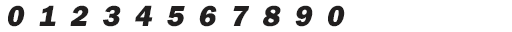
<style>
.page{position:relative;width:512px;height:32px;background:#ffffff}
.page>*{position:absolute;margin:0}
.t1{font:30px "FranklinGothic-Heavy";letter-spacing:0.05em;color:#211f1f;font-style:italic}
</style>
<div class="page">
<p class="t1" style="left:8px;top:5px;width:17px;height:22px">0</p>
<p class="t1" style="left:39px;top:5px;width:17px;height:21px">1</p>
<p class="t1" style="left:70px;top:5px;width:19px;height:21px">2</p>
<p class="t1" style="left:103px;top:5px;width:18px;height:22px">3</p>
<p class="t1" style="left:135px;top:5px;width:18px;height:21px">4</p>
<p class="t1" style="left:167px;top:6px;width:18px;height:21px">5</p>
<p class="t1" style="left:199px;top:5px;width:18px;height:22px">6</p>
<p class="t1" style="left:233px;top:6px;width:17px;height:20px">7</p>
<p class="t1" style="left:263px;top:5px;width:18px;height:22px">8</p>
<p class="t1" style="left:295px;top:5px;width:18px;height:22px">9</p>
<p class="t1" style="left:328px;top:5px;width:17px;height:22px">0</p>
</div>
